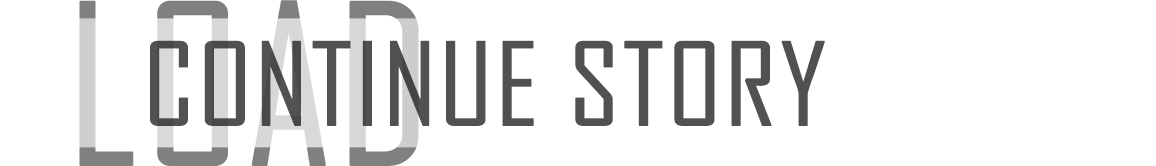
<style>
.page{position:relative;width:1156px;height:166px;background:#ffffff}
.page>*{position:absolute;margin:0}
.t1{font:214px "AgencyFB-Reg";text-transform:uppercase;font-weight:bold}
.t2{font:110px "AgencyFB-Reg";color:#515151;text-transform:uppercase;font-weight:bold;scale:1.1 1}
</style>
<div class="page">
<p class="t1" style="left:79px;top:0px;width:340px;height:166px">load</p>
<p class="t2" style="left:150px;top:40px;width:675px;height:86px">continue story</p>
</div>
